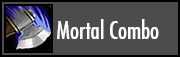
<style>
.page{position:relative;width:180px;height:57px;background:#4c4c4c}
.page>*{position:absolute;margin:0}
.t1{font:24px "FuturaCondensed";color:#ffffff}
</style>
<div class="page">
<p class="t1" style="left:57px;top:19px;width:102px;height:20px">Mortal Combo</p>
</div>
